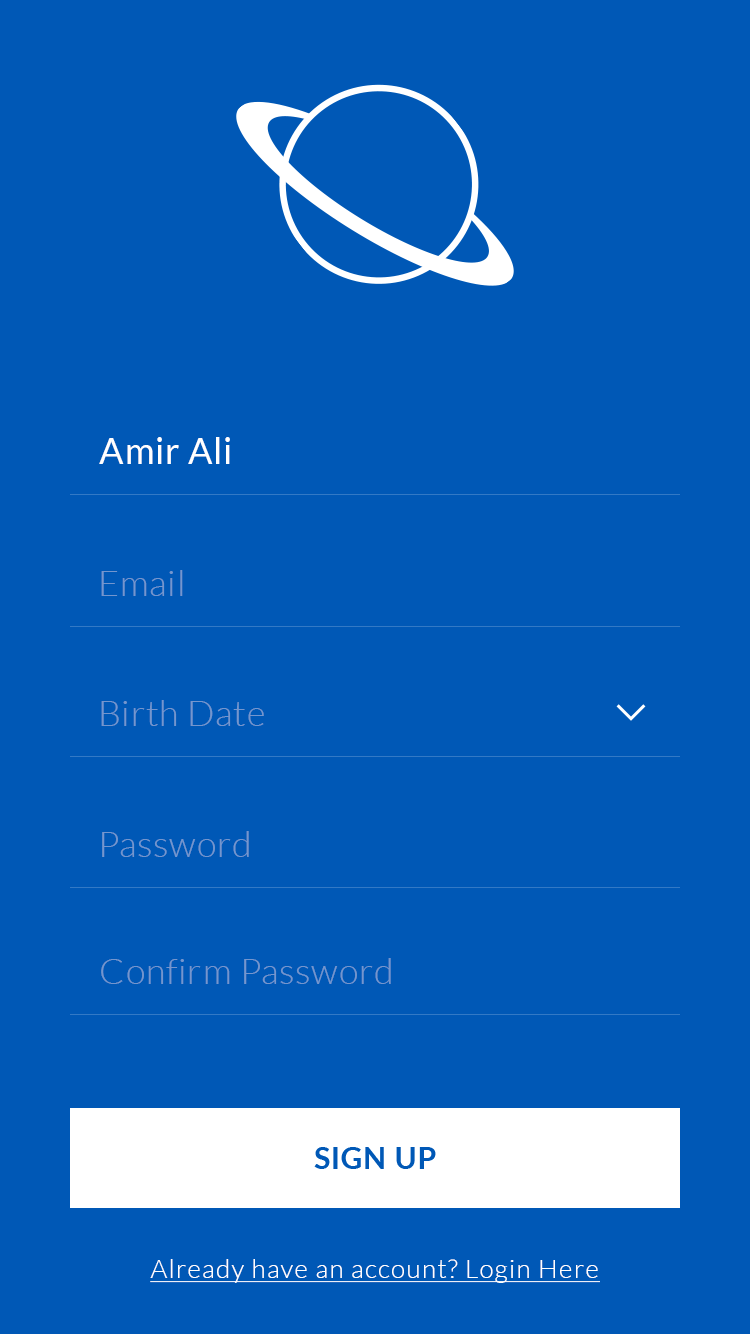
<style>
.page{position:relative;width:750px;height:1334px;background:#0058b6}
.page>*{position:absolute;margin:0}
.t1{font:36px "Lato-Regular";letter-spacing:0.02em;color:#ffffff}
.t2{font:36px "Lato-Light";letter-spacing:0.02em;color:#7496ce}
.t3{font:30px "Lato-Bold";letter-spacing:0.02em;color:#0058b6}
.t4{font:26px "Lato-Light";letter-spacing:0.05em;color:#ffffff;text-decoration:underline}
</style>
<div class="page">
<p class="t1" style="left:99px;top:437px;width:131px;height:27px">Amir Ali</p>
<p class="t2" style="left:101px;top:570px;width:82px;height:26px">Email</p>
<p class="t2" style="left:101px;top:700px;width:163px;height:26px">Birth Date</p>
<p class="t2" style="left:102px;top:831px;width:147px;height:26px">Password</p>
<p class="t2" style="left:101px;top:958px;width:290px;height:26px">Confirm Password</p>
<p class="t3" style="left:314px;top:1147px;width:122px;height:22px">SIGN UP</p>
<p class="t4" style="left:150px;top:1259px;width:450px;height:24px">Already have an account? Login Here</p>
</div>
